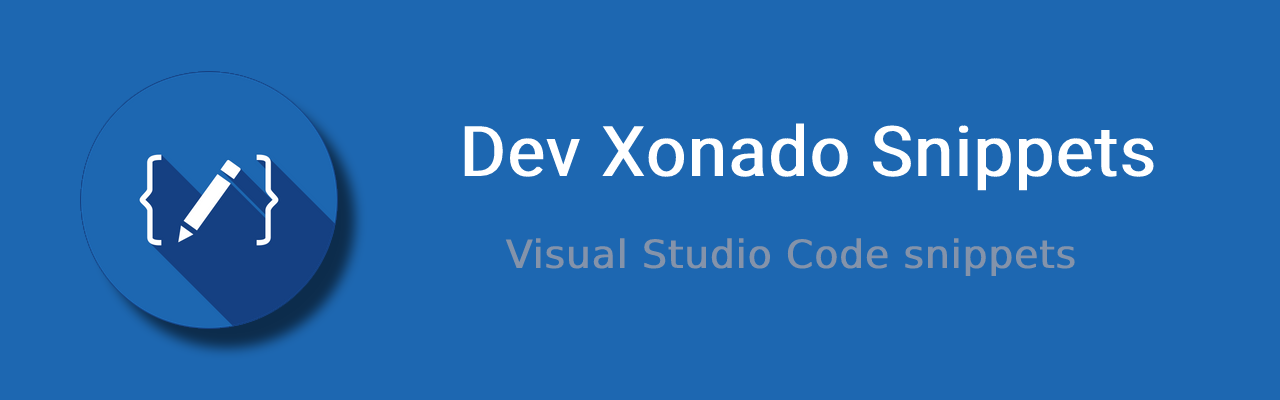
<style>
.page{position:relative;width:1280px;height:400px;background:#1d67b1}
.page>*{position:absolute;margin:0}
.t1{font:70px "Roboto-Regular";color:#ffffff;font-weight:bold}
.t2{font:39px "DejaVuSans";color:#8493aa;font-weight:bold}
</style>
<div class="page">
<p class="t1" style="left:464px;top:123px;width:690px;height:68px">Dev Xonado Snippets</p>
<p class="t2" style="left:505px;top:238px;width:570px;height:39px">Visual Studio Code snippets</p>
</div>
